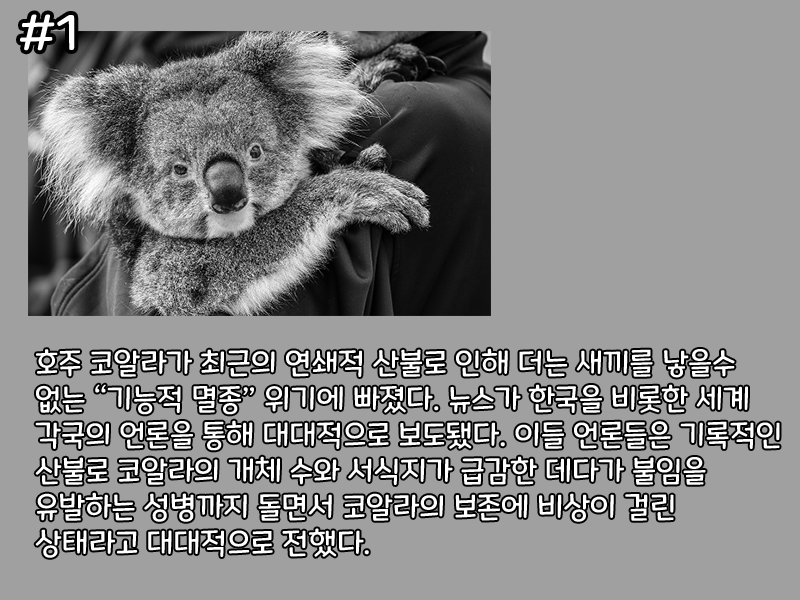
<style>
.page{position:relative;width:800px;height:600px;background:#a0a0a0}
.page>*{position:absolute;margin:0}
.t1{font:48px "MaplestoryLight";color:#ffffff}
.t2{font:30px "MaplestoryLight";color:#ffffff}
</style>
<div class="page">
<p class="t1" style="left:20px;top:14px;width:55px;height:37px">#1</p>
<p class="t2" style="left:35px;top:348px;width:745px;height:210px">호주 코알라가 최근의 연쇄적 산불로 인해 더는 새끼를 낳을수 없는 “기능적 멸종” 위기에 빠졌다. 뉴스가 한국을 비롯한 세계 각국의 언론을 통해 대대적으로 보도됐다. 이들 언론들은 기록적인 산불로 코알라의 개체 수와 서식지가 급감한 데다가 불임을 유발하는 성병까지 돌면서 코알라의 보존에 비상이 걸린 상태라고 대대적으로 전했다.</p>
</div>
